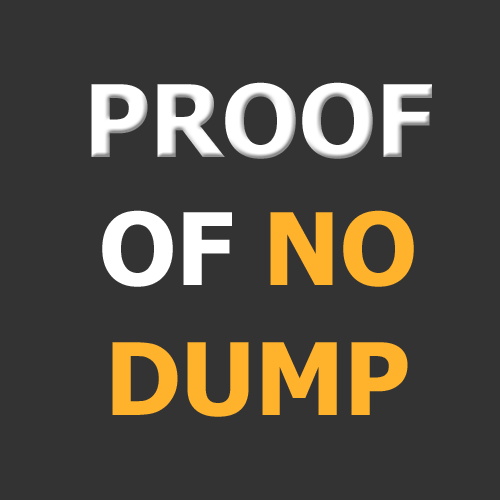
<style>
.page{position:relative;width:500px;height:500px;background:#333333}
.page>*{position:absolute;margin:0}
.t1{font:100px "Tahoma-Bold";color:#ffffff}
.t2{font:100px "Tahoma-Bold";color:#ffb22b}
</style>
<div class="page">
<p class="t1" style="left:91px;top:82px;width:341px;height:77px">PROOF</p>
<p class="t1" style="left:102px;top:210px;width:312px;height:77px">OF<span class="t2"> NO</span></p>
<p class="t2" style="left:112px;top:342px;width:296px;height:75px">DUMP</p>
</div>
